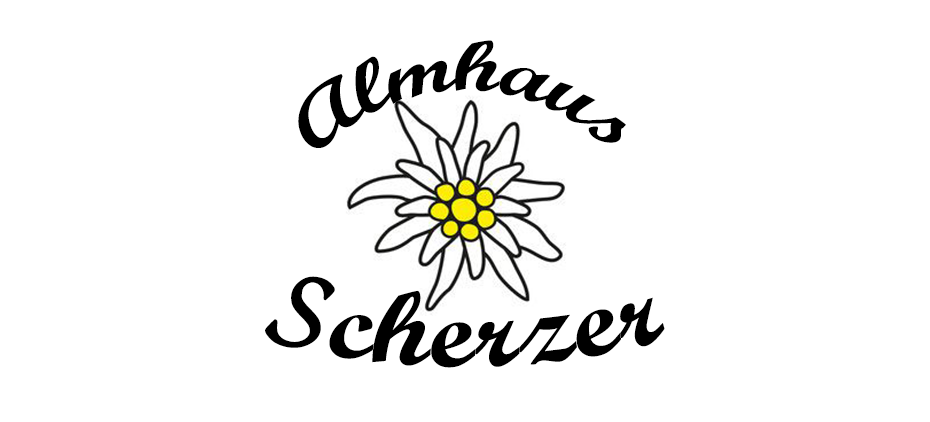
<style>
.page{position:relative;width:930px;height:422px;background:#ffffff}
.page>*{position:absolute;margin:0}
.t1{font:73.7px "ScriptMTBold";color:#000000}
.t2{font:107.8px "ScriptMTBold";color:#000000}
</style>
<div class="page">
<p class="t1" style="left:298px;top:40px;width:328px;height:108px">Almhaus</p>
<p class="t2" style="left:265px;top:276px;width:400px;height:92px">Scherzer</p>
</div>
